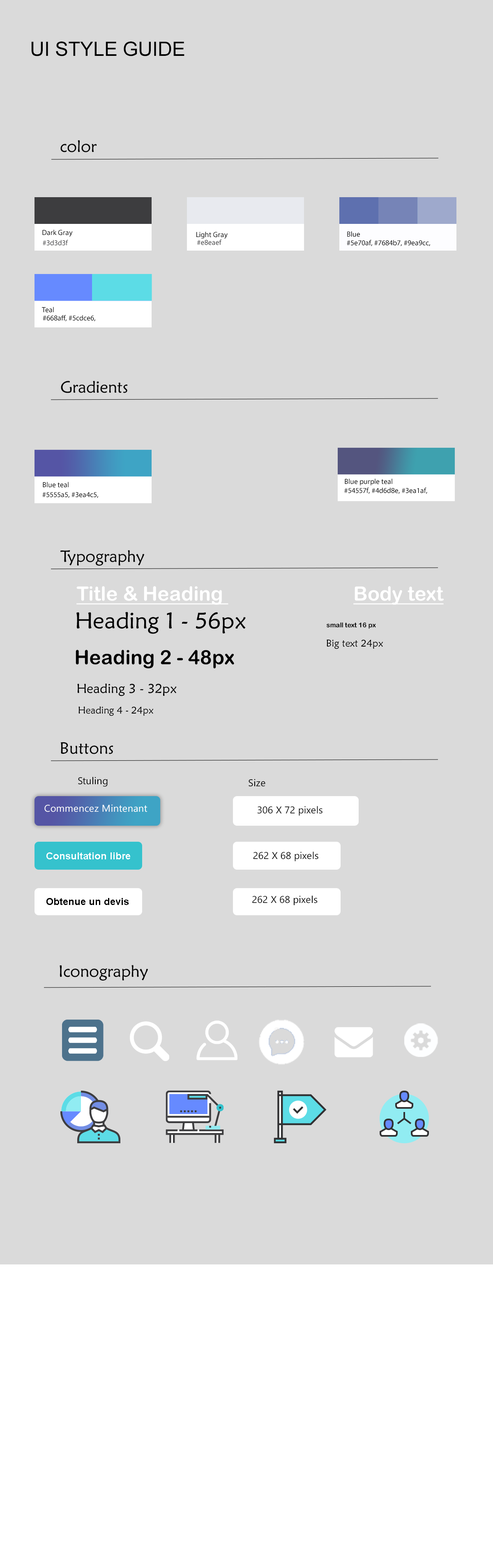
<style>
.page{position:relative;width:493px;height:1568px;background:#dadada}
.page>*{position:absolute;margin:0}
.t1{font:19.7px "ArialMT";color:#000000}
.t2{font:16.4px "MaiandraGD-Regular";color:#000000}
.t3{font:7.4px "MyriadPro-Regular";color:#000000}
.t4{font:7.4px "MyriadPro-Regular";color:#3d3d3f}
.t5{font:7.4px "MyriadPro-Regular";color:#010101}
.t6{font:7.4px/28.8px "MyriadPro-Regular";color:#000000}
.t7{font:19.7px "ArialRoundedMTBold";color:#ffffff;text-decoration:underline}
.t8{font:23px "MaiandraGD-Regular";color:#000000}
.t9{font:6.6px "ArialRoundedMTBold";color:#000000}
.t10{font:9.9px "MaiandraGD-Regular";color:#000000}
.t11{font:19.7px "ArialRoundedMTBold";color:#000000}
.t12{font:13.1px "MaiandraGD-Regular";color:#000000}
.t13{font:9.9px "Arial-BoldMT";color:#fffefe}
.t14{font:9.9px "Arial-BoldMT";color:#000000}
</style>
<div class="page">
<p class="t1" style="left:31px;top:41px;width:153px;height:15px">UI STYLE GUIDE</p>
<p class="t2" style="left:60px;top:140px;width:37px;height:12px">color</p>
<p class="t3" style="left:42px;top:230px;width:31px;height:7px">Dark Gray</p>
<p class="t3" style="left:347px;top:231px;width:13px;height:6px">Blue</p>
<p class="t4" style="left:43px;top:240px;width:25px;height:6px">#3d3d3f</p>
<p class="t3" style="left:347px;top:240px;width:83px;height:6px">#5e70af, #7684b7, #9ea9cc,</p>
<p class="t5" style="left:42px;top:307px;width:12px;height:6px">Teal</p>
<p class="t5" style="left:43px;top:315px;width:52px;height:7px">#668aff, #5cdce6,</p>
<p class="t2" style="left:61px;top:381px;width:67px;height:12px">Gradients</p>
<p class="t6" style="left:43px;top:482px;width:26px;height:6px">Blue teal<br><br>B</p>
<p class="t3" style="left:345px;top:479px;width:47px;height:7px">Blue purple teal</p>
<p class="t3" style="left:42px;top:492px;width:56px;height:6px">#5555a5, #3ea4c5,</p>
<p class="t3" style="left:344px;top:488px;width:83px;height:6px">#54557f, #4d6d8e, #3ea1af,</p>
<p class="t2" style="left:60px;top:550px;width:84px;height:16px">Typography</p>
<p class="t7" style="left:76px;top:586px;width:152px;height:19px">Title &amp; Heading</p>
<p class="t7" style="left:353px;top:586px;width:91px;height:19px">Body text</p>
<p class="t8" style="left:76px;top:612px;width:170px;height:22px">Heading 1 - 56px</p>
<p class="t9" style="left:327px;top:622px;width:49px;height:7px">small text 16 px</p>
<p class="t10" style="left:327px;top:640px;width:56px;height:9px">Big text 24px</p>
<p class="t11" style="left:76px;top:650px;width:158px;height:18px">Heading 2 - 48px</p>
<p class="t12" style="left:77px;top:684px;width:100px;height:12px">Heading 3 - 32px</p>
<p class="t10" style="left:78px;top:706px;width:75px;height:10px">Heading 4 - 24px</p>
<p class="t2" style="left:60px;top:742px;width:53px;height:12px">Buttons</p>
<p class="t13" style="left:46px;top:852px;width:84px;height:7px">Consultation libre</p>
<p class="t14" style="left:46px;top:898px;width:83px;height:7px">Obtenue un devis</p>
<p class="t2" style="left:60px;top:965px;width:88px;height:16px">Iconography</p>
</div>
